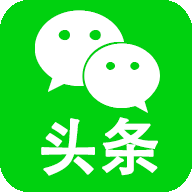
<style>
.page{position:relative;width:192px;height:192px;background:#00d10f}
.page>*{position:absolute;margin:0}
.t1{font:60.8px "STHeitiSC-Medium";color:#ffffff;font-weight:bold}
</style>
<div class="page">
<p class="t1" style="left:41px;top:117px;width:117px;height:59px">头条</p>
</div>
